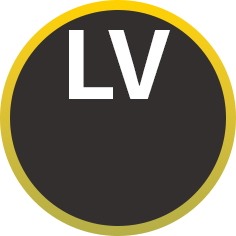
<style>
.page{position:relative;width:236px;height:236px;background:#332f2f}
.page>*{position:absolute;margin:0}
.t1{font:93.8px "SourceHanSansCN-Bold";letter-spacing:0.02em;color:#ffffff;scale:1.05 1}
</style>
<div class="page">
<p class="t1" style="left:69px;top:30px;width:101px;height:69px">LV</p>
</div>
